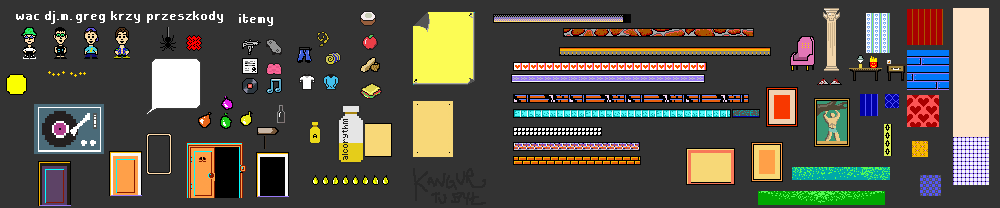
<style>
.page{position:relative;width:1000px;height:208px;background:#333333}
.page>*{position:absolute;margin:0}
.t1{font:12.5px "NeuePixelSans";letter-spacing:0.07em;color:#ffffff;font-weight:bold}
</style>
<div class="page">
<p class="t1" style="left:16px;top:14px;width:23px;height:6px">wac</p>
<p class="t1" style="left:45px;top:11px;width:27px;height:13px">dj.m.</p>
<p class="t1" style="left:76px;top:14px;width:29px;height:9px">greg</p>
<p class="t1" style="left:111px;top:11px;width:29px;height:12px">krzy</p>
<p class="t1" style="left:147px;top:11px;width:76px;height:12px">przeszkody</p>
<p class="t1" style="left:239px;top:14px;width:34px;height:12px">itemy</p>
</div>
